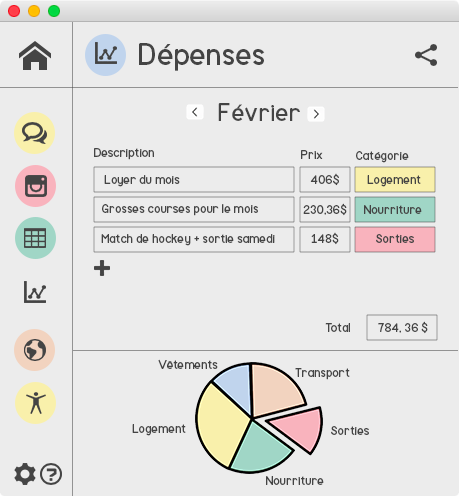
<style>
.page{position:relative;width:459px;height:496px;background:#ececec}
.page>*{position:absolute;margin:0}
.t1{font:30px "Mockup-Regular";color:#444444}
.t2{font:24px "Mockup-Regular";color:#444444}
.t3{font:12px "Mockup-Regular";color:#444444}
</style>
<div class="page">
<p class="t1" style="left:139px;top:43px;width:126px;height:28px">Dépenses</p>
<p class="t2" style="left:218px;top:103px;width:82px;height:18px">Février</p>
<p class="t3" style="left:94px;top:148px;width:60px;height:12px">Description</p>
<p class="t3" style="left:301px;top:150px;width:22px;height:9px">Prix</p>
<p class="t3" style="left:356px;top:151px;width:53px;height:12px">Catégorie</p>
<p class="t3" style="left:310px;top:173px;width:29px;height:13px">406$</p>
<p class="t3" style="left:104px;top:175px;width:76px;height:12px">Loyer du mois</p>
<p class="t3" style="left:367px;top:175px;width:54px;height:12px">Logement</p>
<p class="t3" style="left:102px;top:204px;width:156px;height:12px">Grosses courses pour le mois</p>
<p class="t3" style="left:303px;top:203px;width:44px;height:13px">230,36$</p>
<p class="t3" style="left:364px;top:205px;width:58px;height:9px">Nourriture</p>
<p class="t3" style="left:311px;top:232px;width:28px;height:13px">148$</p>
<p class="t3" style="left:101px;top:234px;width:174px;height:12px">Match de hockey + sortie samedi</p>
<p class="t3" style="left:376px;top:234px;width:38px;height:9px">Sorties</p>
<p class="t3" style="left:325px;top:323px;width:25px;height:9px">Total</p>
<p class="t3" style="left:378px;top:321px;width:50px;height:13px">784, 36 $</p>
<p class="t3" style="left:158px;top:359px;width:60px;height:10px">Vêtements</p>
<p class="t3" style="left:295px;top:368px;width:55px;height:12px">Transport</p>
<p class="t3" style="left:132px;top:424px;width:54px;height:12px">Logement</p>
<p class="t3" style="left:331px;top:426px;width:38px;height:9px">Sorties</p>
<p class="t3" style="left:266px;top:476px;width:58px;height:9px">Nourriture</p>
</div>
